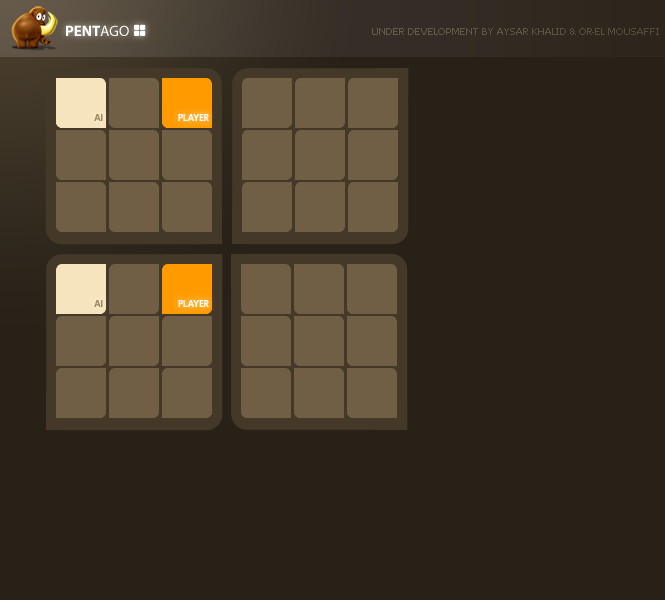
<style>
.page{position:relative;width:665px;height:600px;background:#272118}
.page>*{position:absolute;margin:0}
.t1{font:15px "MyriadPro-Bold";color:#ffffff;text-transform:uppercase}
.t2{font:15px "MyriadPro-Regular";color:#ffffff;text-transform:uppercase}
.t3{font:9px "Tahoma";color:#605444;text-transform:uppercase}
.t4{font:10px "Ligurino-Bold";color:#9c8759;text-transform:uppercase}
.t5{font:10px "Ligurino-Bold";color:#ffffff;text-transform:uppercase}
</style>
<div class="page">
<p class="t1" style="left:66px;top:25px;width:63px;height:11px">Pent<span class="t2">ago</span></p>
<p class="t3" style="left:372px;top:28px;width:287px;height:7px">under development by aysar khalid &amp; or-el mousaffi</p>
<p class="t4" style="left:94px;top:114px;width:9px;height:7px">AI</p>
<p class="t5" style="left:178px;top:114px;width:31px;height:7px">player</p>
<p class="t4" style="left:94px;top:300px;width:9px;height:7px">AI</p>
<p class="t5" style="left:178px;top:300px;width:31px;height:7px">player</p>
</div>
